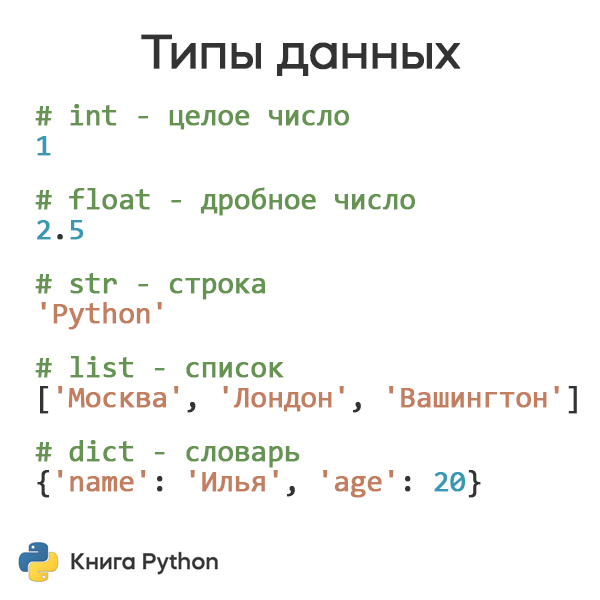
<style>
.page{position:relative;width:600px;height:600px;background:#ffffff}
.page>*{position:absolute;margin:0}
.t1{font:48px "MazzardH-Regular";letter-spacing:-0.025em;color:#333333;font-weight:bold}
.t2{font:30px/30px "Consolas";letter-spacing:-0.025em;color:#659351;font-weight:bold}
.t3{font:30px/30px "Consolas";letter-spacing:-0.025em;color:#3999b5;font-weight:bold}
.t4{font:30px/30px "Consolas";letter-spacing:-0.025em;color:#333333;font-weight:bold}
.t5{font:30px/30px "Consolas";letter-spacing:-0.025em;color:#c37e60;font-weight:bold}
</style>
<div class="page">
<p class="t1" style="left:141px;top:34px;width:320px;height:42px">Типы данных</p>
<p class="t2" style="left:35px;top:104px;width:542px;height:394px"># int - целое число<br><span class="t3">1<br><br></span># float - дробное число<br><span class="t3">2</span><span class="t4">.</span><span class="t3">5<br><br></span># str - строка<br><span class="t5">'Python'<br><br></span># list - список <br><span class="t4">[</span><span class="t5">'Москва'</span><span class="t4">, </span><span class="t5">'Лондон'</span><span class="t4">, </span><span class="t5">'Вашингтон'</span><span class="t4">]<br><br></span># dict - словарь <br><span class="t4">{</span><span class="t5">'name'</span><span class="t4">: </span><span class="t5">'Илья'</span><span class="t4">, </span><span class="t5">'age'</span><span class="t4">: </span><span class="t3">20</span><span class="t4">}</span></p>
</div>
